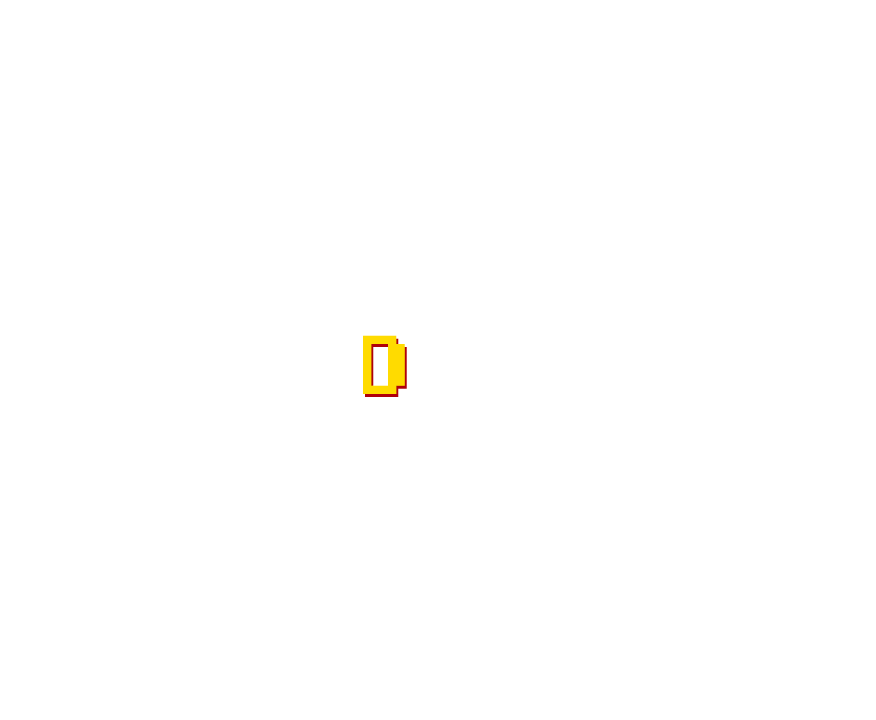
<style>
.page{position:relative;width:876px;height:720px;background:#ffffff}
.page>*{position:absolute;margin:0}
.t1{font:66.7px "Defender";color:#ffdb00}
</style>
<div class="page">
<p class="t1" style="left:363px;top:335px;width:42px;height:59px">D</p>
</div>
